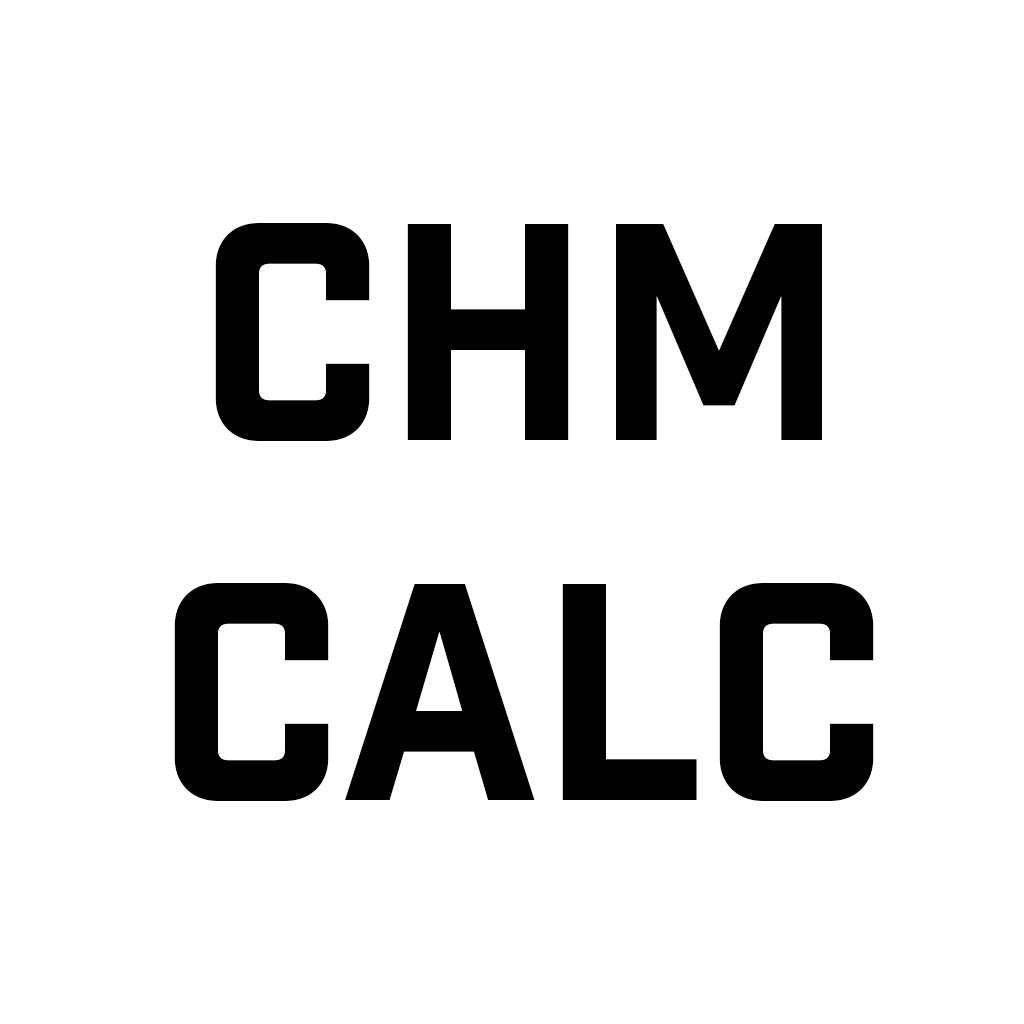
<style>
.page{position:relative;width:1024px;height:1024px;background:#ffffff}
.page>*{position:absolute;margin:0}
.t1{font:300px "IndustryInc-Base";color:#000000}
</style>
<div class="page">
<p class="t1" style="left:174px;top:223px;width:700px;height:578px;text-align:center">CHM<br>CALC</p>
</div>
